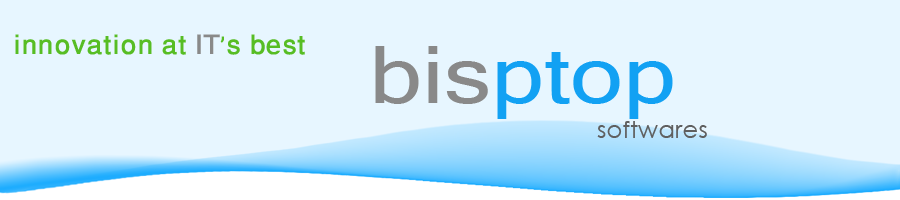
<style>
.page{position:relative;width:900px;height:200px;background:#e7f6ff}
.page>*{position:absolute;margin:0}
.t1{font:37.9px "Latha";color:#57bd24;scale:1.04 1}
.t2{font:37.9px "Latha";color:#898989;scale:1.04 1}
.t3{font:79.9px "MicrosoftSansSerif";color:#12a1f3;scale:1.19 1}
.t4{font:79.9px "MicrosoftSansSerif";color:#898989;scale:1.19 1}
.t5{font:23.9px "CenturyGothic";color:#5f5f5f}
</style>
<div class="page">
<p class="t1" style="left:15px;top:34px;width:290px;height:21px">innovation at <span class="t2">IT</span>’s best</p>
<p class="t3" style="left:375px;top:46px;width:298px;height:73px"><span class="t4">bis</span>ptop</p>
<p class="t5" style="left:597px;top:121px;width:110px;height:17px">softwares</p>
</div>
